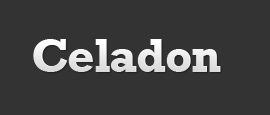
<style>
.page{position:relative;width:270px;height:115px;background:#333333}
.page>*{position:absolute;margin:0}
.t1{font:48px "Rockwell-Bold";letter-spacing:-0.025em;color:#e8e8e8}
</style>
<div class="page">
<p class="t1" style="left:33px;top:39px;width:188px;height:33px">Celadon</p>
</div>
